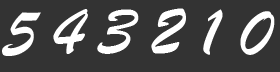
<style>
.page{position:relative;width:280px;height:72px;background:#333333}
.page>*{position:absolute;margin:0}
.t1{font:72px "STXingkai";color:#ffffff}
</style>
<div class="page">
<p class="t1" style="left:2px;top:12px;width:39px;height:44px">5</p>
<p class="t1" style="left:53px;top:9px;width:35px;height:45px">4</p>
<p class="t1" style="left:97px;top:9px;width:42px;height:45px">3</p>
<p class="t1" style="left:151px;top:8px;width:35px;height:46px">2</p>
<p class="t1" style="left:203px;top:9px;width:20px;height:46px">1</p>
<p class="t1" style="left:240px;top:11px;width:35px;height:44px">0</p>
</div>
